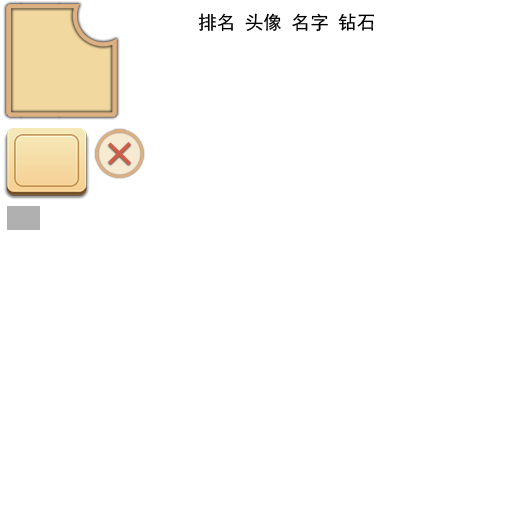
<style>
.page{position:relative;width:512px;height:512px;background:#ffffff}
.page>*{position:absolute;margin:0}
.t1{font:18.7px "SimHei";color:#000000}
</style>
<div class="page">
<p class="t1" style="left:198px;top:13px;width:177px;height:19px">排名 头像 名字 钻石</p>
</div>
